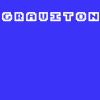
<style>
.page{position:relative;width:100px;height:100px;background:#3c33f9}
.page>*{position:absolute;margin:0}
.t1{font:10px "SmallHollows";letter-spacing:0.025em;color:#ffffff}
</style>
<div class="page">
<p class="t1" style="left:2px;top:12px;width:97px;height:10px">GRAVITON</p>
</div>
